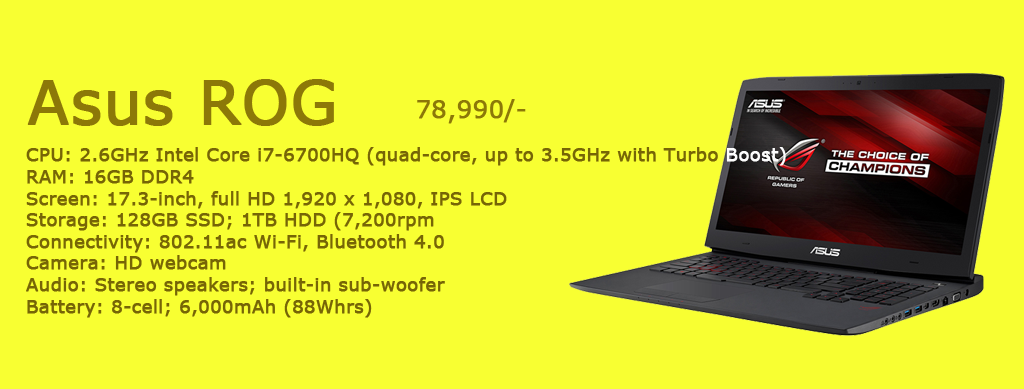
<style>
.page{position:relative;width:1024px;height:389px;background:#f8ff32}
.page>*{position:absolute;margin:0}
.t1{font:60px "Verdana";color:#8c7808;font-weight:bold}
.t2{font:24px "Verdana";color:#8c7808;font-weight:bold}
.t3{font:18px "Verdana";color:#766506;font-weight:bold}
.t4{font:18px "Verdana";color:#fdfdfd;font-weight:bold}
</style>
<div class="page">
<p class="t1" style="left:27px;top:79px;width:307px;height:47px">Asus ROG</p>
<p class="t2" style="left:417px;top:99px;width:109px;height:25px">78,990/-</p>
<p class="t3" style="left:26px;top:147px;width:760px;height:171px">CPU: 2.6GHz Intel Core i7-6700HQ (quad-core, up to 3.5GHz with Turbo <span class="t4">Boost)<br></span>    RAM: 16GB DDR4<br>    Screen: 17.3-inch, full HD 1,920 x 1,080, IPS LCD<br>    Storage: 128GB SSD; 1TB HDD (7,200rpm <br>    Connectivity: 802.11ac Wi-Fi, Bluetooth 4.0<br>    Camera: HD webcam<br>    Audio: Stereo speakers; built-in sub-woofer<br>    Battery: 8-cell; 6,000mAh (88Whrs)<br>    Weight: 4.4kg (9.7 pounds)<br>    Dimensions: 463 x 333 x 23 41mm (W x D x H)</p>
</div>
